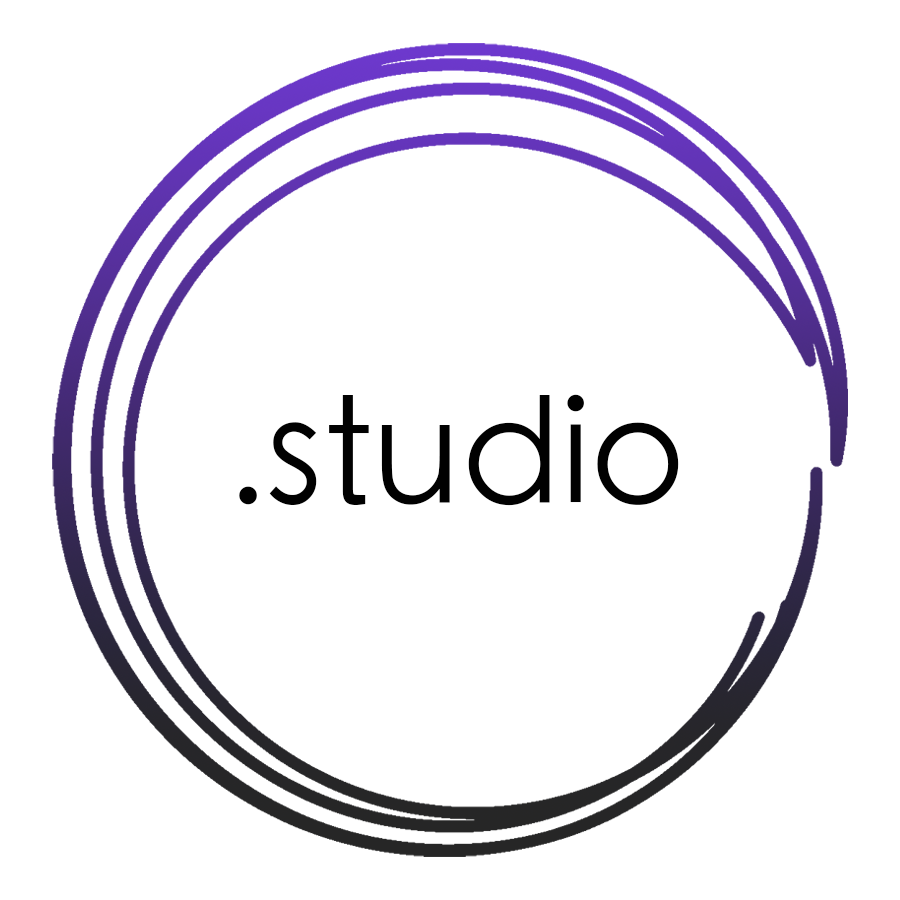
<style>
.page{position:relative;width:900px;height:900px;background:#ffffff}
.page>*{position:absolute;margin:0}
.t1{font:145.8px "STHeitiTC-Light";color:#010101}
</style>
<div class="page">
<p class="t1" style="left:239px;top:394px;width:440px;height:112px">.studio</p>
</div>
